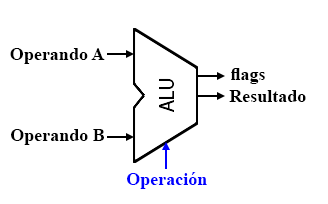
<style>
.page{position:relative;width:328px;height:204px;background:#ffffff}
.page>*{position:absolute;margin:0}
.t1{font:18px "TimesNewRomanPS-BoldMT";color:#000000}
.t2{font:18px "TimesNewRomanPS-BoldMT";color:#0000ff}
</style>
<div class="page">
<p class="t1" style="left:10px;top:48px;width:95px;height:16px">Operando A</p>
<p class="t1" style="left:231px;top:68px;width:34px;height:16px">flags</p>
<p class="t1" style="left:229px;top:90px;width:77px;height:12px">Resultado</p>
<p class="t1" style="left:11px;top:129px;width:93px;height:16px">Operando B</p>
<p class="t2" style="left:127px;top:172px;width:80px;height:17px">Operación</p>
</div>
